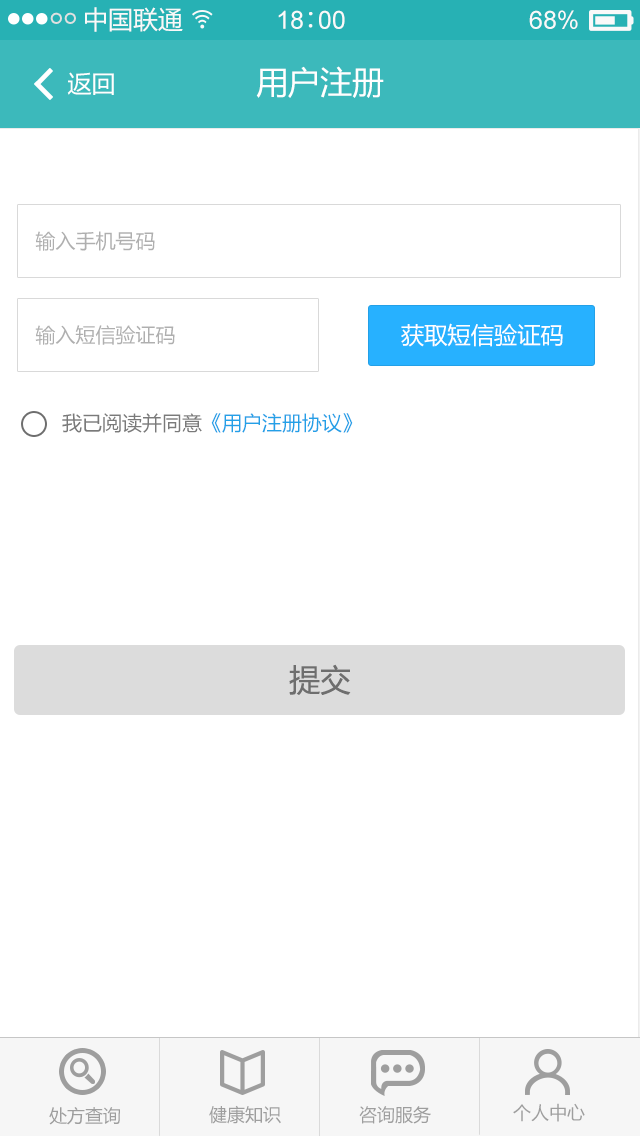
<style>
.page{position:relative;width:640px;height:1136px;background:#ffffff}
.page>*{position:absolute;margin:0}
.t1{font:25px "MicrosoftYaHei";color:#f9f9f9;text-transform:uppercase}
.t2{font:25px "ArialMT";color:#f9f9f9;text-transform:uppercase}
.t3{font:25px "SimSun";color:#f9f9f9;text-transform:uppercase}
.t4{font:24px "MicrosoftYaHei";color:#ffffff;text-transform:uppercase}
.t5{font:32px "MicrosoftYaHei";color:#ffffff;text-transform:uppercase}
.t6{font:20px "MicrosoftYaHei";color:#afafaf;text-transform:uppercase}
.t7{font:23.2px "MicrosoftYaHei";color:#ffffff;text-transform:uppercase}
.t8{font:20px "MicrosoftYaHei";color:#23a0e7;text-transform:uppercase}
.t9{font:20px "MicrosoftYaHei";color:#7a7a7a;text-transform:uppercase}
.t10{font:31px "MicrosoftYaHei";color:#6e6e6e;text-transform:uppercase}
.t11{font:18px "MicrosoftYaHei";color:#9e9e9e;text-transform:uppercase}
</style>
<div class="page">
<p class="t1" style="left:85px;top:7px;width:98px;height:25px">中国联通</p>
<p class="t2" style="left:278px;top:10px;width:67px;height:19px">18<span class="t3">∶</span>00</p>
<p class="t2" style="left:529px;top:10px;width:49px;height:19px">68%</p>
<p class="t4" style="left:67px;top:72px;width:47px;height:23px">返回</p>
<p class="t5" style="left:256px;top:66px;width:128px;height:32px">用户注册</p>
<p class="t6" style="left:35px;top:231px;width:120px;height:20px">输入手机号码</p>
<p class="t6" style="left:35px;top:325px;width:140px;height:20px">输入短信验证码</p>
<p class="t7" style="left:401px;top:323px;width:162px;height:24px">获取短信验证码</p>
<p class="t8" style="left:62px;top:413px;width:291px;height:20px"><span class="t9">我已阅读并同意</span>《用户注册协议》</p>
<p class="t10" style="left:289px;top:664px;width:62px;height:31px">提交</p>
<p class="t11" style="left:49px;top:1107px;width:71px;height:18px">处方查询</p>
<p class="t11" style="left:209px;top:1105px;width:72px;height:19px">健康知识</p>
<p class="t11" style="left:359px;top:1106px;width:72px;height:18px">咨询服务</p>
<p class="t11" style="left:513px;top:1103px;width:72px;height:19px">个人中心</p>
</div>
